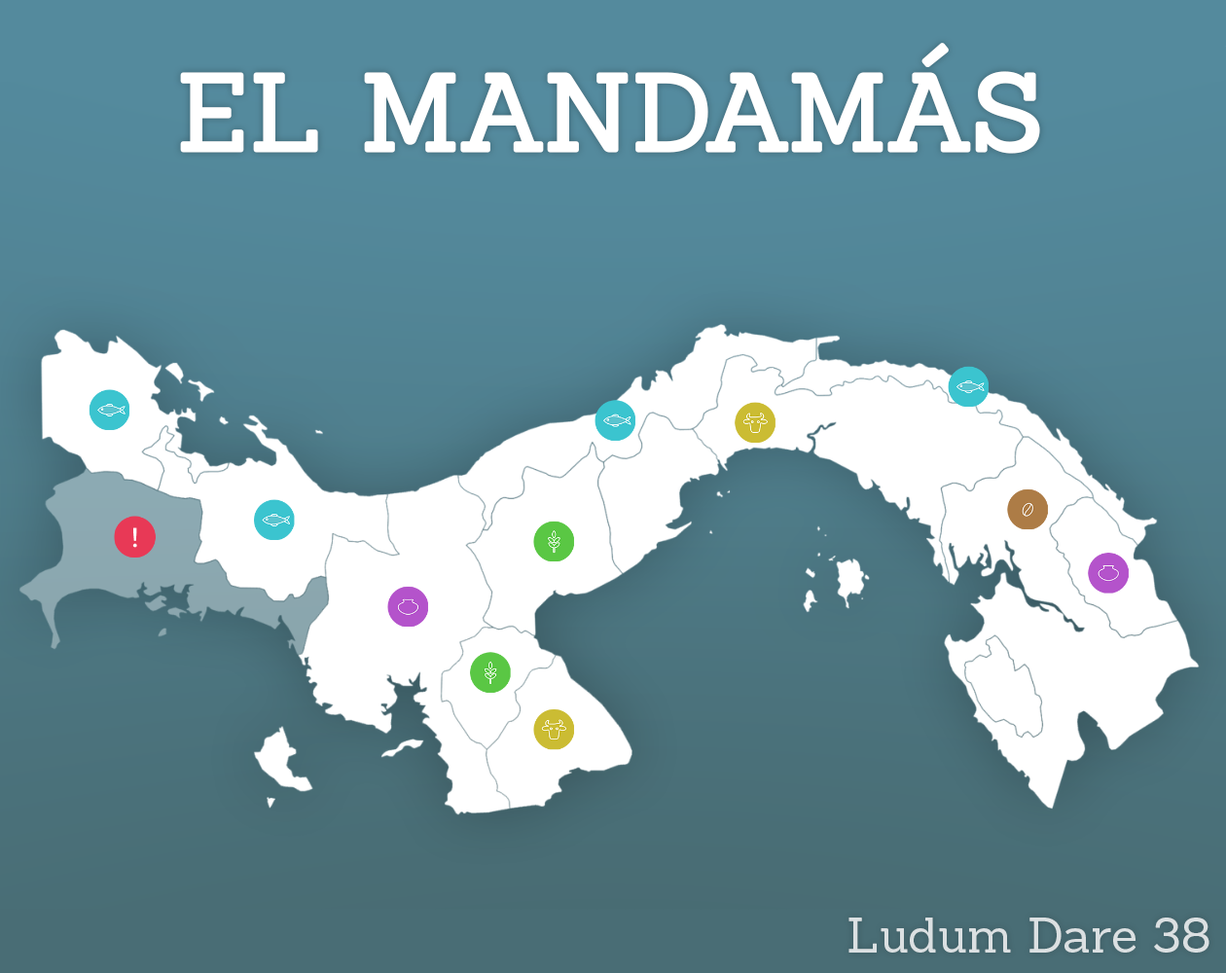
<style>
.page{position:relative;width:1226px;height:973px}
.page>*{position:absolute;margin:0}
.t1{font:107px "Sanchez-Regular";color:#ffffff;font-weight:bold}
.t2{font:48.6px "Sanchez-Regular";color:#dbe0e2}
</style>
<div class="page">
<p class="t1" style="left:180px;top:43px;width:860px;height:111px">EL MANDAMÁS</p>
<p class="t2" style="left:848px;top:917px;width:361px;height:35px">Ludum Dare 38</p>
</div>
